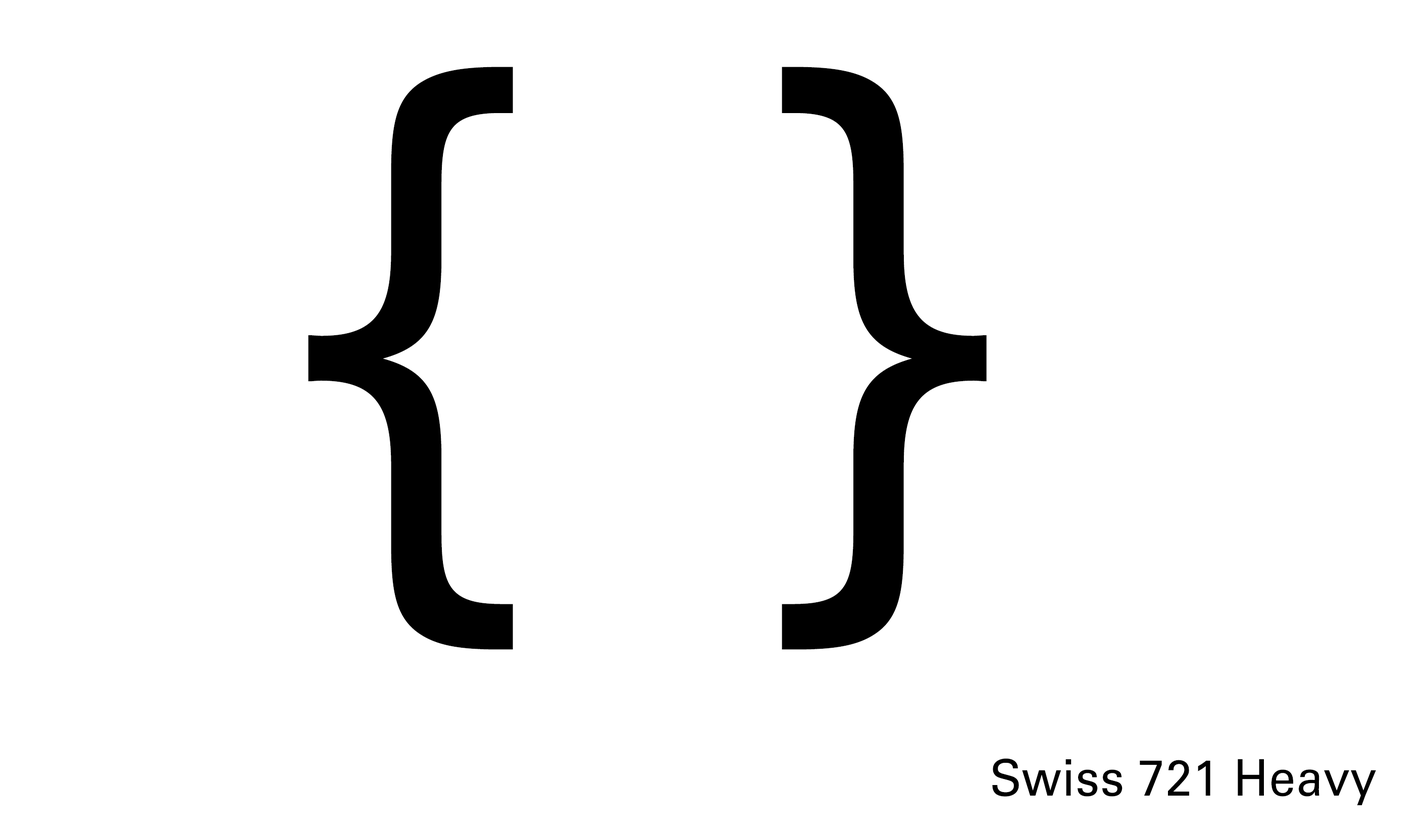
<style>
.page{position:relative;width:1427px;height:835px;background:#ffffff}
.page>*{position:absolute;margin:0}
.t1{font:641.5px "RotisSemiSerif";letter-spacing:0.01em;scale:0.95 1}
.t2{font:729.6px "UniversLTStd";letter-spacing:0.01em;color:#000000;scale:0.95 1}
.t3{font:631.5px "BauLF-Medium";letter-spacing:0.01em;color:#000000;scale:0.95 1}
.t4{font:631.5px "Swiss721BT-Roman";letter-spacing:0.01em;color:#000000;scale:0.95 1}
.t5{font:50.5px "UniversLTStd";letter-spacing:0.01em;color:#000000;scale:0.95 1}
.t6{font:50.5px "UniversLTStd";letter-spacing:0.01em;scale:0.95 1}
</style>
<div class="page">
<p class="t1" style="left:306px;top:34px;width:680px;height:640px">{ }</p>
<p class="t2" style="left:310px;top:36px;width:670px;height:639px">{ }</p>
<p class="t3" style="left:316px;top:57px;width:672px;height:610px">{ }</p>
<p class="t4" style="left:308px;top:67px;width:679px;height:583px">{ }</p>
<p class="t5" style="left:992px;top:759px;width:384px;height:47px">Swiss 721 Heavy</p>
<p class="t6" style="left:995px;top:759px;width:132px;height:38px">Beirut</p>
</div>
